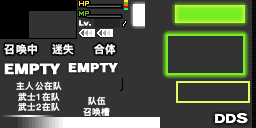
<style>
.page{position:relative;width:256px;height:128px;background:#333333}
.page>*{position:absolute;margin:0}
.t1{font:10.7px "DFKingGothicSC14-Semibold";letter-spacing:0.045em;color:#ffffff}
.t2{font:8.7px/10.7px "DFKingGothicSC14-Semibold";letter-spacing:0.045em;color:#ffffff}
</style>
<div class="page">
<p class="t1" style="left:4px;top:44px;width:33px;height:11px">召唤中</p>
<p class="t1" style="left:52px;top:44px;width:22px;height:11px">迷失</p>
<p class="t1" style="left:94px;top:44px;width:22px;height:11px">合体</p>
<p class="t2" style="left:16px;top:81px;width:46px;height:30px;text-align:center">主人公在队<br>武士1在队<br>武士2在队</p>
<p class="t2" style="left:83px;top:96px;width:27px;height:20px;text-align:center">队伍<br>召唤槽</p>
</div>
